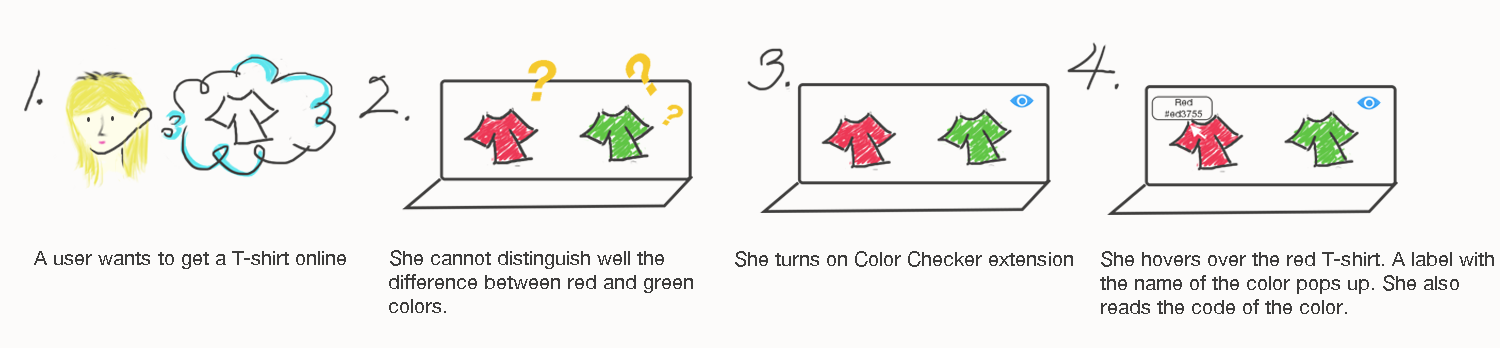
<style>
.page{position:relative;width:1500px;height:348px;background:#fcfbfa}
.page>*{position:absolute;margin:0}
.t1{font:20px "HelveticaNeue";color:#3e3d3c}
</style>
<div class="page">
<p class="t1" style="left:34px;top:250px;width:659px;height:63px">A user wants to get a T-shirt online       She cannot distinguish well the <br>              difference between red and green <br>              colors.</p>
<p class="t1" style="left:735px;top:251px;width:759px;height:63px">She turns on Color Checker extension  She hovers over the red T-shirt. A label with<br>           the name of the color pops up. She also <br>           reads the code of the color.</p>
</div>
